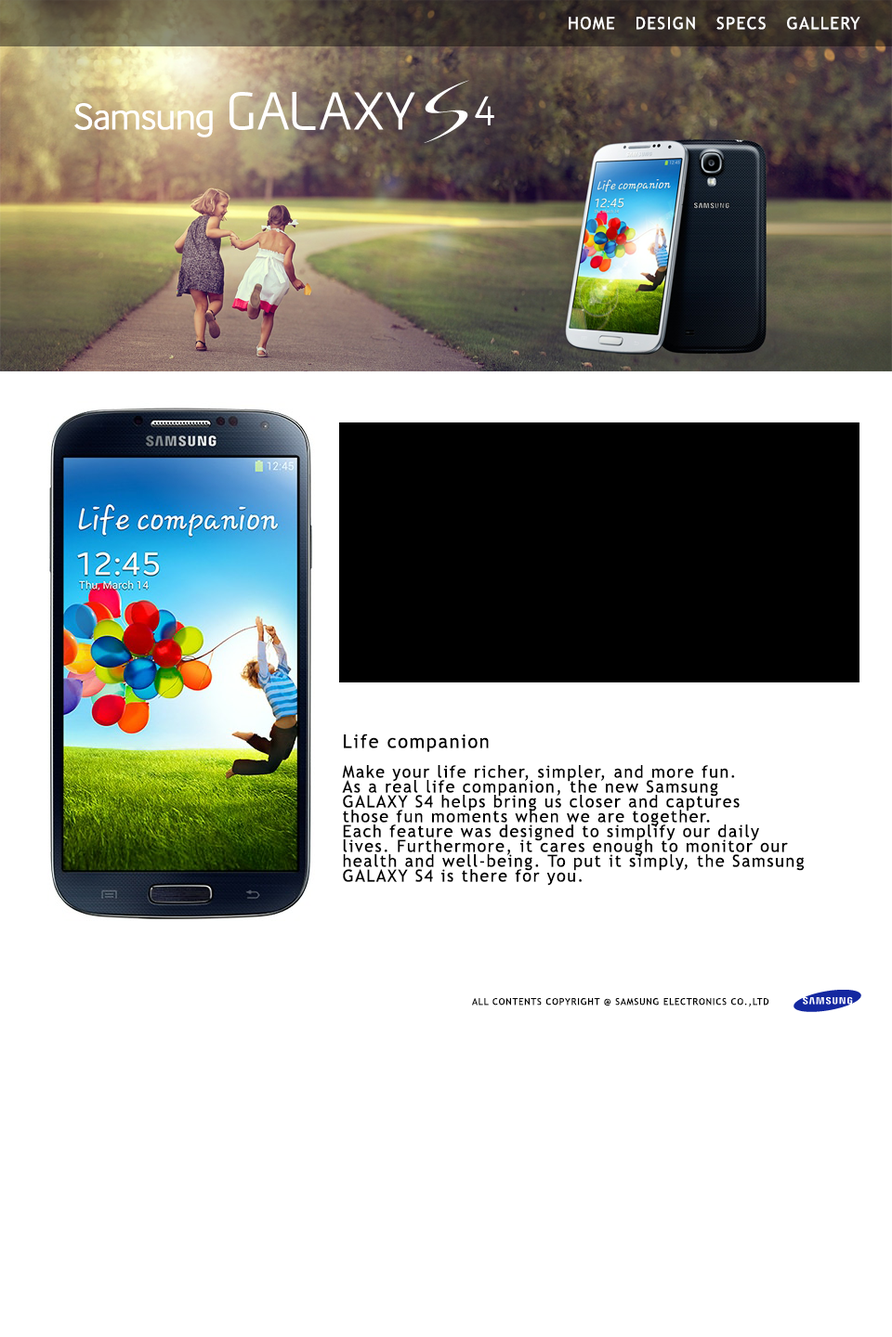
<style>
.page{position:relative;width:892px;height:1337px;background:#ffffff}
.page>*{position:absolute;margin:0}
.t1{font:16.7px "TrebuchetMS";letter-spacing:0.08em;color:#ffffff}
.t2{font:16.7px/14.9px "TrebuchetMS";letter-spacing:0.08em;color:#000000}
.t3{font:18.6px/14.9px "TrebuchetMS";letter-spacing:0.08em;color:#000000}
.t4{font:9.3px "TrebuchetMS";letter-spacing:0.08em;color:#000000}
</style>
<div class="page">
<p class="t1" style="left:568px;top:17px;width:292px;height:13px">HOME   DESIGN   SPECS   GALLERY</p>
<p class="t2" style="left:342px;top:734px;width:462px;height:152px"><span class="t3">Life companion<br><br></span>Make your life richer, simpler, and more fun.<br>As a real life companion, the new Samsung <br>GALAXY S4 helps bring us closer and captures <br>those fun moments when we are together.<br>Each feature was designed to simplify our daily <br>lives. Furthermore, it cares enough to monitor our<br>health and well-being. To put it simply, the Samsung <br>GALAXY S4 is there for you.</p>
<p class="t4" style="left:472px;top:997px;width:297px;height:11px">ALL CONTENTS COPYRIGHT @ SAMSUNG ELECTRONICS CO.,LTD</p>
</div>
